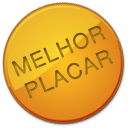
<style>
.page{position:relative;width:128px;height:128px;background:#ffffff}
.page>*{position:absolute;margin:0}
.t1{font:21px "HelveticaNeue-Light";letter-spacing:0.08em;font-weight:bold}
</style>
<div class="page">
<p class="t1" style="left:11px;top:26px;width:102px;height:73px;text-align:center;rotate:-23deg">MELHOR<br>PLACAR</p>
</div>
